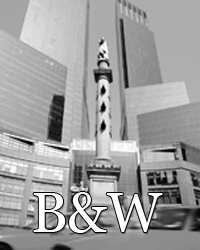
<style>
.page{position:relative;width:200px;height:250px}
.page>*{position:absolute;margin:0}
.t1{font:55.6px "Georgia";color:#fefefe}
</style>
<div class="page">
<p class="t1" style="left:33px;top:192px;width:130px;height:41px">B&amp;W</p>
</div>
